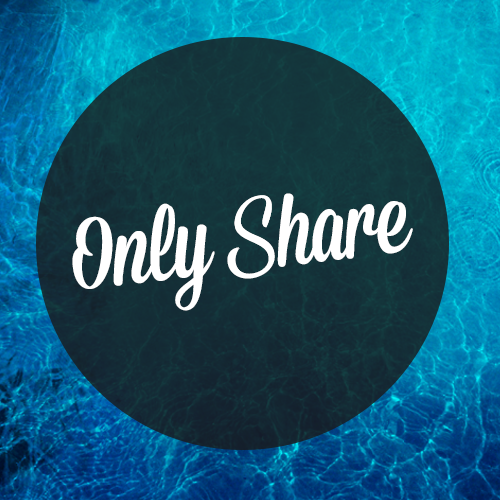
<style>
.page{position:relative;width:500px;height:500px}
.page>*{position:absolute;margin:0}
.t1{font:100.2px "Mission-Script";letter-spacing:-0.025em;color:#ffffff}
.t2{font:100.2px "DancingScript";letter-spacing:-0.025em;color:#ffffff}
.t3{font:100.1px "DancingScript";letter-spacing:-0.025em;color:#ffffff}
</style>
<div class="page">
<p class="t1" style="left:72px;top:193px;width:341px;height:118px;rotate:-7deg">Only <span class="t2">S</span>hare</p>
<p class="t3" style="left:227px;top:195px;width:47px;height:83px;rotate:-6deg">S</p>
</div>
